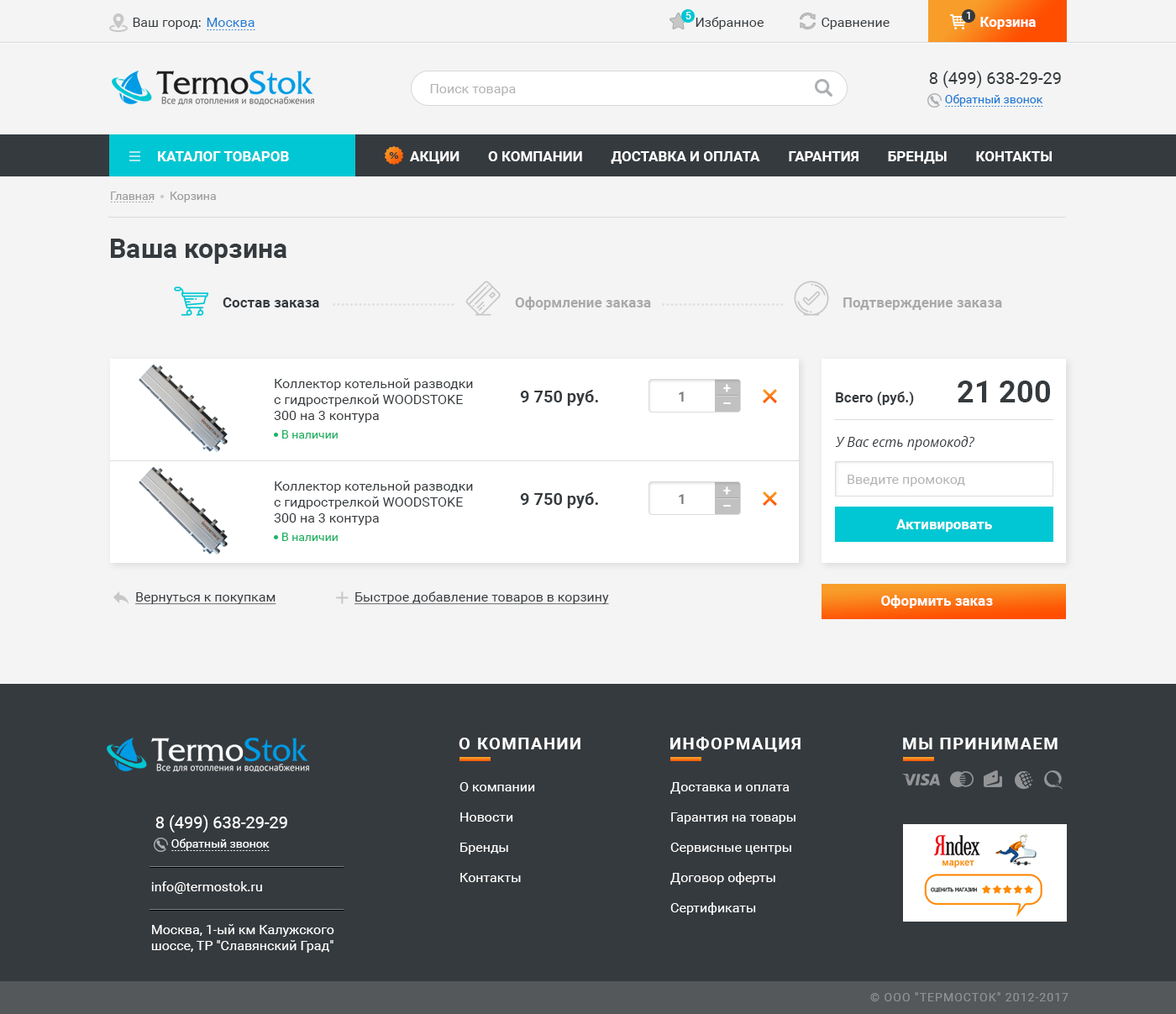
<style>
.page{position:relative;width:1176px;height:1014px;background:#f4f4f4}
.page>*{position:absolute;margin:0}
.t1{font:13.4px "Roboto-Regular";color:#353a3e}
.t2{font:13.4px "Roboto-Regular";color:#1b7ad6}
.t3{font:10.1px "Roboto-Regular";color:#ffffff}
.t4{font:14.3px "Roboto-Bold";color:#ffffff}
.t5{font:11.8px "Roboto-Regular";color:#1b7ad6}
.t6{font:16.8px "Roboto-Regular";color:#353a3e}
.t7{font:13.4px "Roboto-Regular";color:#b4b3b3}
.t8{font:14.3px "Roboto-Bold";color:#ffffff;text-transform:uppercase}
.t9{font:11.8px "Roboto-Regular";color:#9c9c9c}
.t10{font:26.9px "Roboto-Bold";color:#353a3e}
.t11{font:14.3px "Roboto-Bold";color:#353a3e}
.t12{font:15.1px "Roboto-Bold";color:#e1e1e1}
.t13{font:14.3px "Roboto-Bold";color:#a9a9a9}
.t14{font:16.8px "Roboto-Bold";color:#353a3e}
.t15{font:30.2px "Roboto-Bold";color:#353a3e}
.t16{font:14.3px "Roboto-Bold";color:#7d7d7d}
.t17{font:11.8px "Roboto-Regular";color:#1db263}
.t18{font:13.4px "OpenSans-Italic";color:#353a3e}
.t19{font:13.4px "Roboto-Regular";color:#353a3e;text-decoration:underline}
.t20{font:16.8px "Roboto-Bold";letter-spacing:0.075em;color:#ffffff;text-transform:uppercase}
.t21{font:13.4px/30.2px "Roboto-Regular";color:#ffffff}
.t22{font:16.8px "Roboto-Regular";color:#ffffff}
.t23{font:11.8px "Roboto-Regular";color:#ffffff}
.t24{font:13.4px "Roboto-Regular";color:#ffffff}
.t25{font:11.8px "Roboto-Regular";letter-spacing:0.075em;color:#8e9193;text-transform:uppercase}
</style>
<div class="page">
<p class="t1" style="left:133px;top:18px;width:68px;height:11px">Ваш город:</p>
<p class="t2" style="left:207px;top:18px;width:48px;height:9px">Москва</p>
<p class="t3" style="left:685px;top:12px;width:6px;height:7px">5</p>
<p class="t1" style="left:696px;top:17px;width:68px;height:12px">Избранное</p>
<p class="t1" style="left:822px;top:18px;width:68px;height:11px">Сравнение</p>
<p class="t3" style="left:966px;top:12px;width:4px;height:7px">1</p>
<p class="t4" style="left:980px;top:17px;width:56px;height:12px">Корзина</p>
<p class="t5" style="left:207px;top:29px;width:48px;height:1px">................</p>
<p class="t6" style="left:929px;top:71px;width:132px;height:17px">8 (499) 638-29-29</p>
<p class="t7" style="left:430px;top:84px;width:86px;height:12px">Поиск товара</p>
<p class="t5" style="left:945px;top:94px;width:98px;height:12px">Обратный звонок</p>
<p class="t5" style="left:945px;top:106px;width:98px;height:1px">................................</p>
<p class="t8" style="left:158px;top:151px;width:131px;height:10px">КАТАЛОГ ТОВАРОВ</p>
<p class="t8" style="left:410px;top:151px;width:642px;height:13px">Акции        О компании        Доставка и оплата        Гарантия        Бренды        Контакты</p>
<p class="t9" style="left:111px;top:192px;width:44px;height:8px">Главная</p>
<p class="t9" style="left:171px;top:192px;width:45px;height:10px">Корзина</p>
<p class="t9" style="left:110px;top:202px;width:43px;height:0px">..............</p>
<p class="t10" style="left:111px;top:239px;width:176px;height:25px">Ваша корзина</p>
<p class="t11" style="left:223px;top:297px;width:96px;height:10px">Состав заказа</p>
<p class="t12" style="left:333px;top:303px;width:121px;height:3px">............................</p>
<p class="t13" style="left:515px;top:297px;width:136px;height:13px">Оформление заказа</p>
<p class="t12" style="left:662px;top:303px;width:122px;height:3px">............................</p>
<p class="t13" style="left:843px;top:297px;width:159px;height:13px">Подтверждение заказа</p>
<p class="t1" style="left:274px;top:378px;width:199px;height:45px">Коллектор котельной разводки <br>с гидрострелкой WOODSTOKE <br>300 на 3 контура</p>
<p class="t14" style="left:520px;top:390px;width:78px;height:16px">9 750 руб.</p>
<p class="t4" style="left:723px;top:384px;width:8px;height:8px">+</p>
<p class="t15" style="left:958px;top:381px;width:92px;height:21px">21 200</p>
<p class="t16" style="left:679px;top:391px;width:5px;height:11px">1</p>
<p class="t11" style="left:836px;top:391px;width:78px;height:15px">Всего (руб.)</p>
<p class="t4" style="left:723px;top:402px;width:8px;height:2px">–</p>
<p class="t17" style="left:282px;top:430px;width:56px;height:9px">В наличии</p>
<p class="t18" style="left:835px;top:436px;width:139px;height:14px">У Вас есть промокод?</p>
<p class="t1" style="left:274px;top:481px;width:199px;height:44px">Коллектор котельной разводки <br>с гидрострелкой WOODSTOKE <br>300 на 3 контура</p>
<p class="t7" style="left:848px;top:475px;width:117px;height:11px">Введите промокод</p>
<p class="t14" style="left:520px;top:492px;width:78px;height:16px">9 750 руб.</p>
<p class="t16" style="left:679px;top:494px;width:5px;height:10px">1</p>
<p class="t4" style="left:723px;top:486px;width:8px;height:9px">+</p>
<p class="t4" style="left:723px;top:505px;width:8px;height:2px">–</p>
<p class="t4" style="left:896px;top:519px;width:96px;height:13px">Активировать</p>
<p class="t17" style="left:282px;top:533px;width:56px;height:8px">В наличии</p>
<p class="t19" style="left:135px;top:592px;width:141px;height:13px">Вернуться к покупкам</p>
<p class="t19" style="left:354px;top:591px;width:255px;height:14px">Быстрое добавление товаров в корзину</p>
<p class="t4" style="left:881px;top:595px;width:112px;height:13px">Оформить заказ</p>
<p class="t20" style="left:459px;top:738px;width:121px;height:11px">О КОМПАНИИ</p>
<p class="t20" style="left:670px;top:737px;width:131px;height:15px">ИНФОРМАЦИЯ</p>
<p class="t20" style="left:903px;top:738px;width:155px;height:11px">Мы принимаем</p>
<p class="t21" style="left:460px;top:782px;width:75px;height:100px">О компании<br>Новости<br>Бренды<br>Контакты</p>
<p class="t21" style="left:670px;top:782px;width:126px;height:133px">Доставка и оплата<br>Гарантия на товары<br>Сервисные центры<br>Договор оферты<br>Сертификаты</p>
<p class="t22" style="left:155px;top:815px;width:132px;height:17px">8 (499) 638-29-29</p>
<p class="t23" style="left:171px;top:838px;width:99px;height:12px">Обратный звонок</p>
<p class="t23" style="left:171px;top:850px;width:99px;height:1px">................................</p>
<p class="t24" style="left:151px;top:881px;width:111px;height:13px">info@termostok.ru</p>
<p class="t24" style="left:151px;top:924px;width:183px;height:29px">Москва, 1-ый км Калужского <br>шоссе, ТР "Славянский Град"</p>
<p class="t25" style="left:870px;top:992px;width:199px;height:9px">© ООО "Термосток" 2012-2017</p>
</div>
